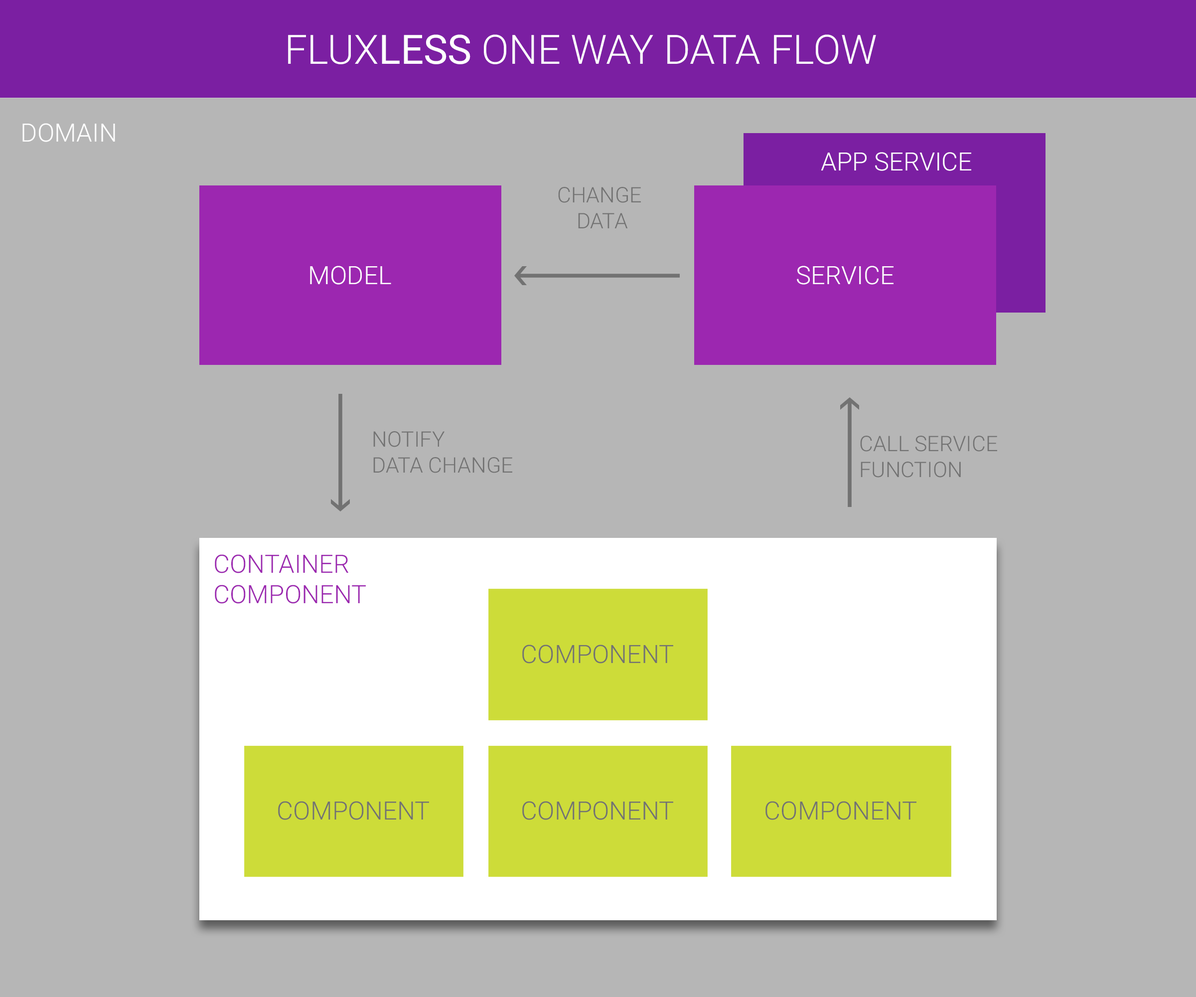
<style>
.page{position:relative;width:1196px;height:997px;background:#b6b6b6}
.page>*{position:absolute;margin:0}
.t1{font:40.5px "Roboto-Light";color:#ffffff}
.t2{font:40.5px "Roboto-Regular";color:#ffffff}
.t3{font:25.3px "Roboto-Light";color:#ffffff}
.t4{font:21.5px "Roboto-Light";color:#727272}
.t5{font:25.3px "Roboto-Light";color:#9c27b0}
.t6{font:25.3px "Roboto-Light";color:#727272}
</style>
<div class="page">
<p class="t1" style="left:288px;top:34px;width:588px;height:30px">FLUX<span class="t2">LESS</span> ONE WAY DATA FLOW</p>
<p class="t3" style="left:22px;top:123px;width:93px;height:19px">DOMAIN</p>
<p class="t3" style="left:821px;top:152px;width:150px;height:19px">APP SERVICE</p>
<p class="t4" style="left:558px;top:187px;width:83px;height:41px;text-align:center">CHANGE <br>DATA</p>
<p class="t3" style="left:310px;top:266px;width:81px;height:19px">MODEL</p>
<p class="t3" style="left:797px;top:266px;width:97px;height:19px">SERVICE</p>
<p class="t4" style="left:373px;top:431px;width:139px;height:42px">NOTIFY<br>DATA CHANGE</p>
<p class="t4" style="left:860px;top:436px;width:137px;height:41px">CALL SERVICE<br>FUNCTION</p>
<p class="t5" style="left:215px;top:554px;width:151px;height:50px">CONTAINER<br>COMPONENT</p>
<p class="t6" style="left:522px;top:644px;width:151px;height:19px">COMPONENT</p>
<p class="t6" style="left:278px;top:801px;width:151px;height:19px">COMPONENT</p>
<p class="t6" style="left:522px;top:801px;width:151px;height:19px">COMPONENT</p>
<p class="t6" style="left:766px;top:801px;width:151px;height:19px">COMPONENT</p>
</div>
